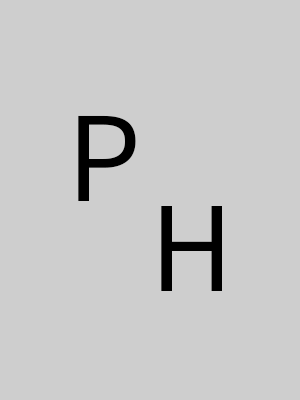
<style>
.page{position:relative;width:300px;height:400px;background:#cecece}
.page>*{position:absolute;margin:0}
.t1{font:129.2px "SourceSansPro-Regular";letter-spacing:0.02em;color:#000000}
</style>
<div class="page">
<p class="t1" style="left:78px;top:115px;width:58px;height:86px">P</p>
<p class="t1" style="left:161px;top:206px;width:61px;height:85px">H</p>
</div>
